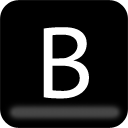
<style>
.page{position:relative;width:128px;height:128px;background:#000000}
.page>*{position:absolute;margin:0}
.t1{font:99.2px "PTSans-Regular";color:#ffffff}
</style>
<div class="page">
<p class="t1" style="left:43px;top:27px;width:46px;height:72px">B</p>
</div>
